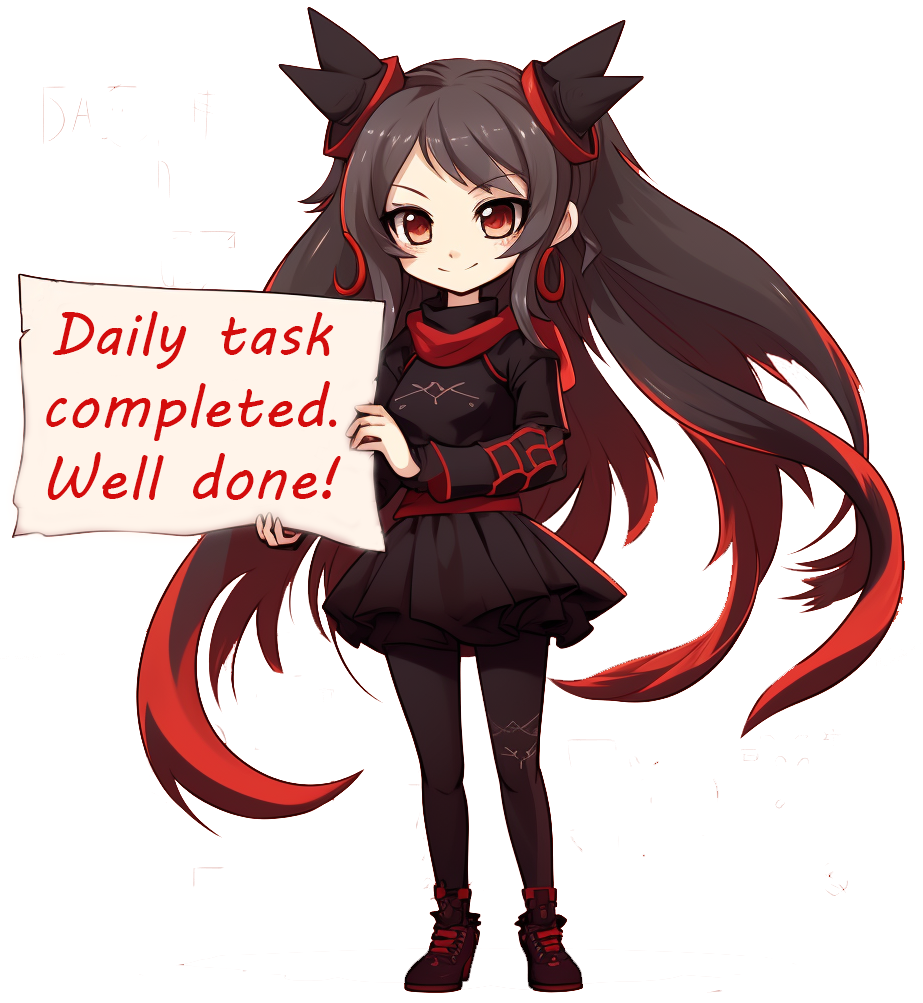
<style>
.page{position:relative;width:923px;height:1003px;background:#ffffff}
.page>*{position:absolute;margin:0}
.t1{font:60px "MVBoli";letter-spacing:0.006em;color:#d40c0c}
.t2{font:60px "MyriadPro-Regular";letter-spacing:0.006em;color:#d40c0c}
</style>
<div class="page">
<p class="t1" style="left:46px;top:311px;width:295px;height:189px;text-align:center">Daily task completed<span class="t2">.<br></span>Well done!</p>
</div>
